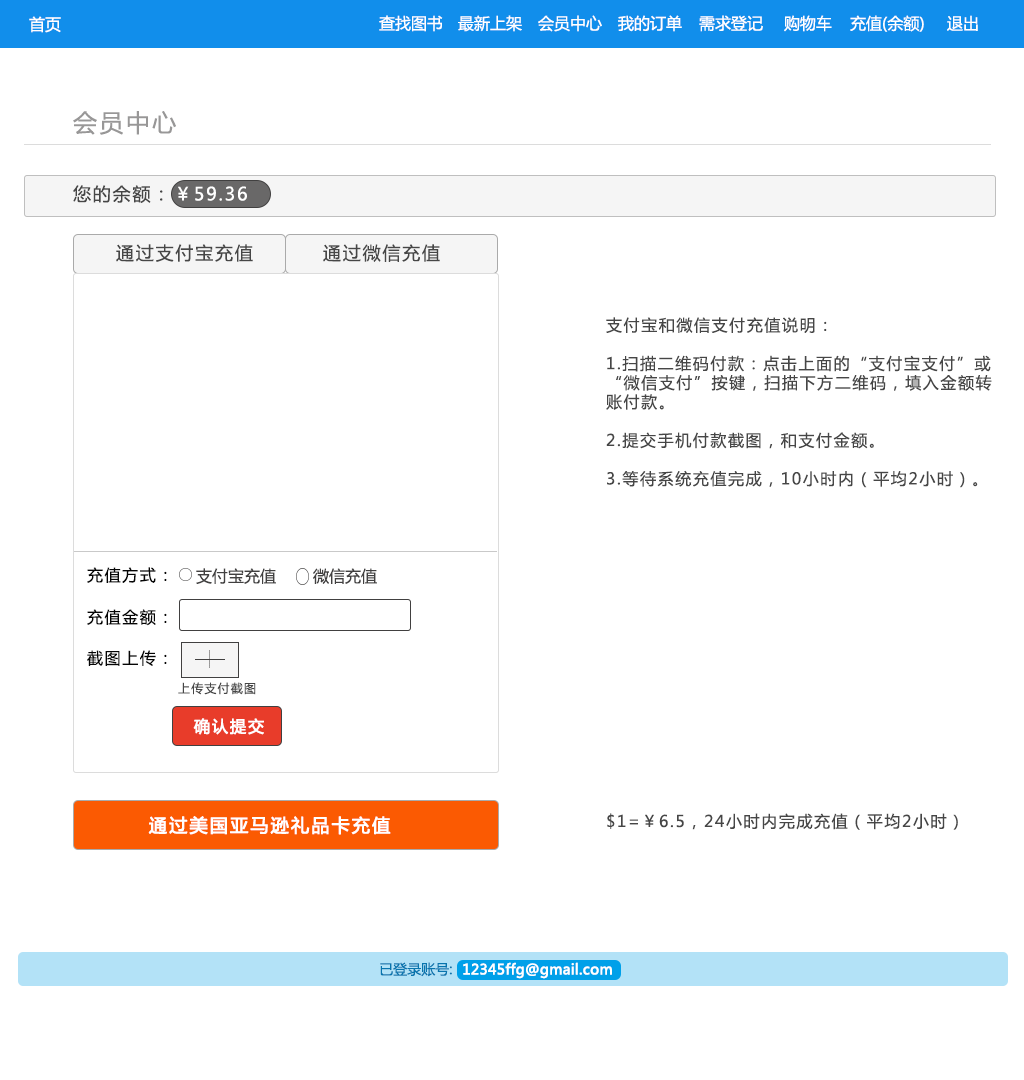
<style>
.page{position:relative;width:1024px;height:1080px;background:#ffffff}
.page>*{position:absolute;margin:0}
.t1{font:16px "MicrosoftYaHei";color:#ffffff}
.t2{font:24px "MicrosoftYaHei";letter-spacing:0.1em;color:#989797}
.t3{font:18px "MicrosoftYaHei";letter-spacing:0.1em;color:#464646}
.t4{font:18px "MicrosoftYaHei";letter-spacing:0.1em;color:#ffffff}
.t5{font:16px "MicrosoftYaHei";letter-spacing:0.1em;color:#464646}
.t6{font:16px "MicrosoftYaHei";letter-spacing:0.1em;color:#050505}
.t7{font:16px "MicrosoftYaHei";color:#414040}
.t8{font:12px "MicrosoftYaHei";letter-spacing:0.1em;color:#464646}
.t9{font:16px "MicrosoftYaHei";letter-spacing:0.1em;color:#fefefe;font-weight:bold}
.t10{font:18px "MicrosoftYaHei";letter-spacing:0.1em;color:#ffffff;font-weight:bold}
.t11{font:14px "MicrosoftYaHei";color:#0875ae}
.t12{font:14px "MicrosoftYaHei";color:#ffffff;font-weight:bold}
</style>
<div class="page">
<p class="t1" style="left:29px;top:16px;width:32px;height:17px">首页</p>
<p class="t1" style="left:379px;top:15px;width:64px;height:17px">查找图书</p>
<p class="t1" style="left:458px;top:15px;width:64px;height:17px">最新上架</p>
<p class="t1" style="left:538px;top:15px;width:64px;height:17px">会员中心</p>
<p class="t1" style="left:618px;top:15px;width:64px;height:17px">我的订单</p>
<p class="t1" style="left:699px;top:15px;width:64px;height:17px">需求登记</p>
<p class="t1" style="left:784px;top:15px;width:48px;height:17px">购物车</p>
<p class="t1" style="left:850px;top:15px;width:74px;height:17px">充值(余额)</p>
<p class="t1" style="left:947px;top:15px;width:31px;height:16px">退出</p>
<p class="t2" style="left:73px;top:111px;width:103px;height:24px">会员中心</p>
<p class="t3" style="left:73px;top:185px;width:90px;height:18px">您的余额：</p>
<p class="t4" style="left:178px;top:186px;width:69px;height:15px">￥59.36</p>
<p class="t3" style="left:116px;top:244px;width:137px;height:18px">通过支付宝充值</p>
<p class="t3" style="left:323px;top:244px;width:117px;height:18px">通过微信充值</p>
<p class="t5" style="left:606px;top:317px;width:386px;height:171px">支付宝和微信支付充值说明：<br><br>1.扫描二维码付款：点击上面的“支付宝支付”或“微信支付”按键，扫描下方二维码，填入金额转账付款。<br><br>2.提交手机付款截图，和支付金额。<br><br>3.等待系统充值完成，10小时内（平均2小时）。</p>
<p class="t6" style="left:87px;top:567px;width:80px;height:16px">充值方式：</p>
<p class="t7" style="left:196px;top:568px;width:80px;height:16px">支付宝充值</p>
<p class="t7" style="left:313px;top:568px;width:64px;height:16px">微信充值</p>
<p class="t6" style="left:87px;top:609px;width:80px;height:17px">充值金额：</p>
<p class="t6" style="left:87px;top:650px;width:80px;height:16px">截图上传：</p>
<p class="t8" style="left:178px;top:682px;width:78px;height:13px">上传支付截图</p>
<p class="t9" style="left:193px;top:718px;width:71px;height:17px">确认提交</p>
<p class="t10" style="left:148px;top:816px;width:243px;height:19px">通过美国亚马逊礼品卡充值</p>
<p class="t5" style="left:607px;top:813px;width:351px;height:17px">$1=￥6.5，24小时内完成充值（平均2小时）</p>
<p class="t11" style="left:380px;top:962px;width:72px;height:15px">已登录账号:</p>
<p class="t12" style="left:463px;top:962px;width:149px;height:17px">12345ffg@gmail.com</p>
</div>
